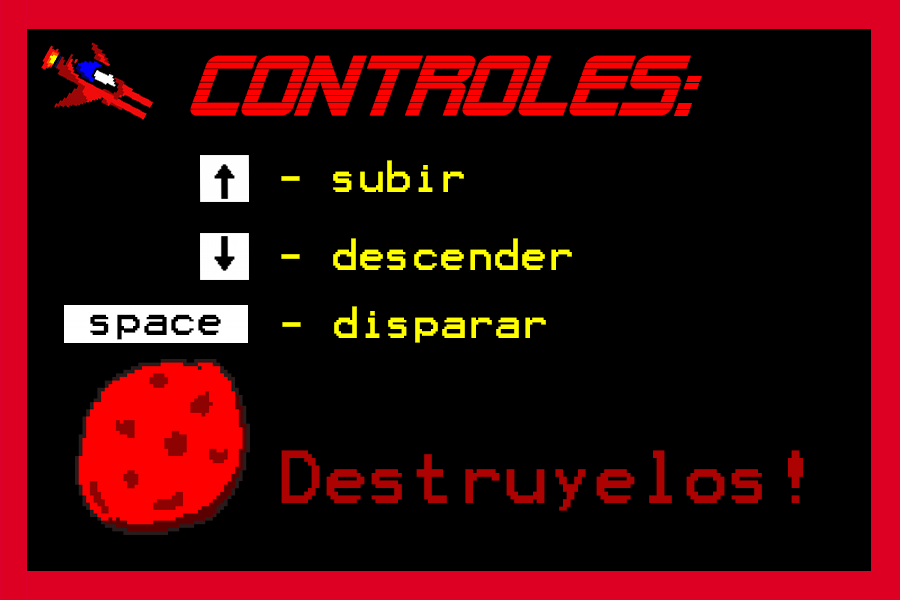
<style>
.page{position:relative;width:900px;height:600px;background:#000000}
.page>*{position:absolute;margin:0}
.t1{font:84px "AlienEncountersBoldItalic";color:#ff0000}
.t2{font:36px "Terminal";color:#ffff00}
.t3{font:36px "Terminal";color:#000000}
.t4{font:60px "Terminal";color:#ad0303}
</style>
<div class="page">
<p class="t1" style="left:190px;top:55px;width:512px;height:61px">controles:</p>
<p class="t2" style="left:281px;top:160px;width:183px;height:32px">- subir</p>
<p class="t2" style="left:281px;top:238px;width:291px;height:32px">- descender</p>
<p class="t3" style="left:90px;top:314px;width:131px;height:26px">space</p>
<p class="t2" style="left:282px;top:306px;width:264px;height:37px">- disparar</p>
<p class="t4" style="left:281px;top:450px;width:522px;height:61px">Destruyelos!</p>
</div>
